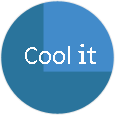
<style>
.page{position:relative;width:115px;height:115px;background:#2a749c}
.page>*{position:absolute;margin:0}
.t1{font:27px "Calibri";color:#ffffff}
.t2{font:27px "Copse";color:#ffffff}
</style>
<div class="page">
<p class="t1" style="left:25px;top:44px;width:71px;height:20px">Cool <span class="t2">it</span></p>
</div>
